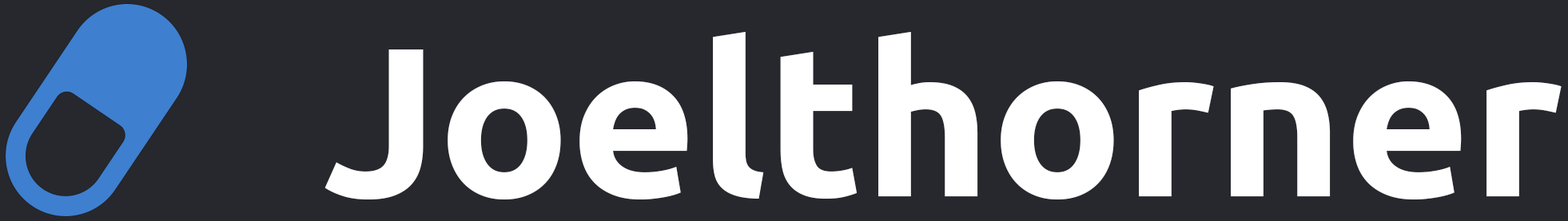
<style>
.page{position:relative;width:1568px;height:221px;background:#27282d}
.page>*{position:absolute;margin:0}
.t1{font:212.6px "Ubuntu-Bold";color:#ffffff}
</style>
<div class="page">
<p class="t1" style="left:324px;top:32px;width:1238px;height:168px">Joelthorner</p>
</div>
